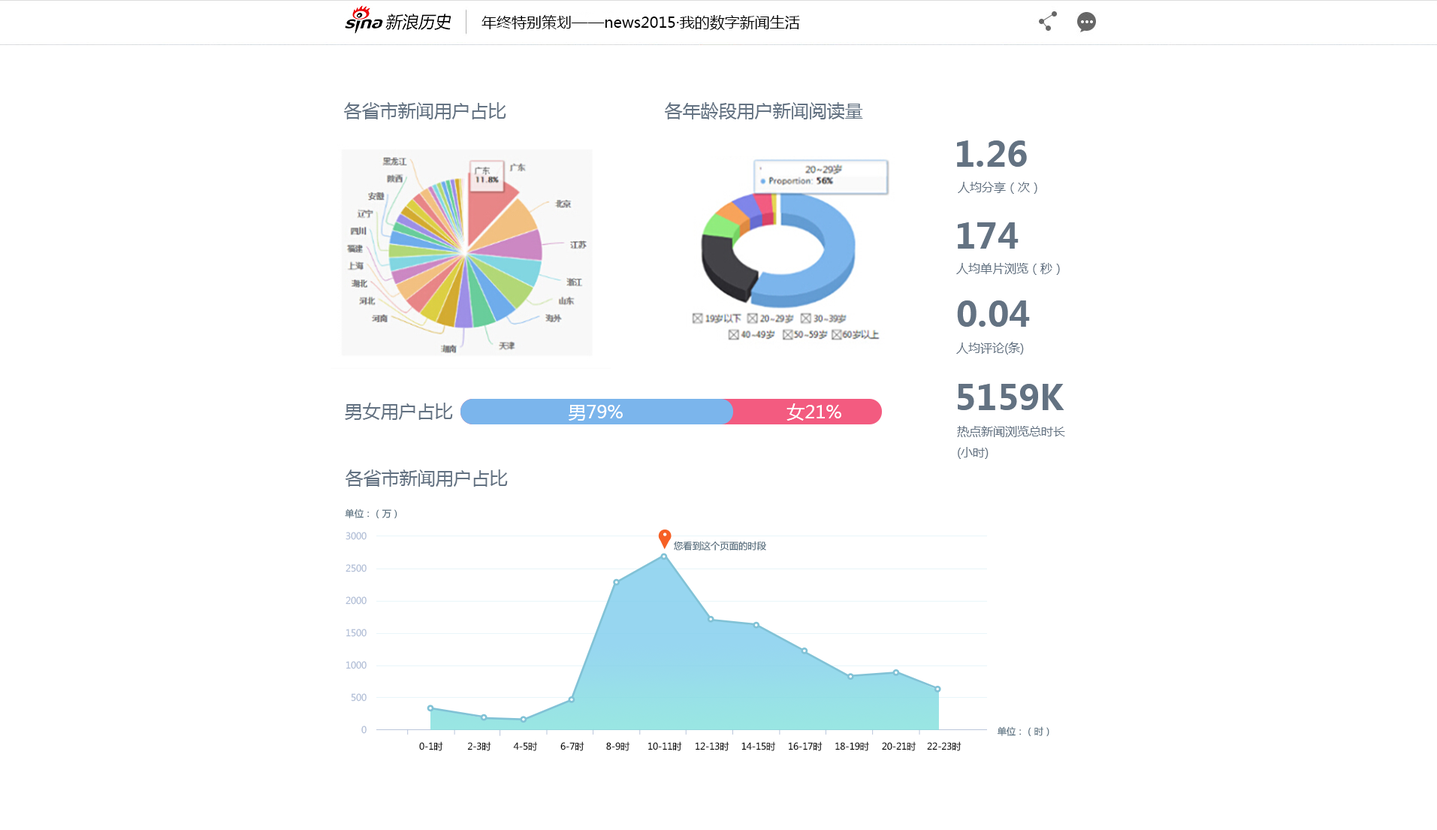
<style>
.page{position:relative;width:1437px;height:830px;background:#ffffff}
.page>*{position:absolute;margin:0}
.t1{font:15px "MicrosoftYaHei";color:#000000}
.t2{font:18px "MicrosoftYaHei";color:#637282}
.t3{font:34.5px "MicrosoftYaHei-Bold";color:#637282}
.t4{font:12px "MicrosoftYaHei";color:#637282}
.t5{font:18px "MicrosoftYaHei";color:#ffffff}
.t6{font:9.2px "MicrosoftYaHei";color:#50697a}
.t7{font:9.2px/32.3px "MicrosoftYaHei";color:#b0bdd6}
.t8{font:9.2px "MicrosoftYaHei";color:#000000}
</style>
<div class="page">
<p class="t1" style="left:481px;top:15px;width:319px;height:15px">年终特别策划——news2015·我的数字新闻生活</p>
<p class="t2" style="left:343px;top:102px;width:163px;height:17px">各省市新闻用户占比</p>
<p class="t2" style="left:664px;top:102px;width:199px;height:17px">各年龄段用户新闻阅读量</p>
<p class="t3" style="left:957px;top:140px;width:70px;height:27px">1.26</p>
<p class="t4" style="left:958px;top:182px;width:79px;height:12px">人均分享（次）</p>
<p class="t3" style="left:958px;top:222px;width:60px;height:27px">174</p>
<p class="t4" style="left:956px;top:263px;width:104px;height:12px">人均单片浏览（秒）</p>
<p class="t3" style="left:957px;top:300px;width:73px;height:27px">0.04</p>
<p class="t4" style="left:956px;top:342px;width:68px;height:13px">人均评论(条)</p>
<p class="t3" style="left:958px;top:383px;width:106px;height:27px">5159K</p>
<p class="t2" style="left:345px;top:403px;width:108px;height:17px">男女用户占比</p>
<p class="t5" style="left:569px;top:405px;width:54px;height:16px">男79%</p>
<p class="t5" style="left:786px;top:403px;width:55px;height:18px">女21%</p>
<p class="t4" style="left:957px;top:426px;width:108px;height:33px">热点新闻浏览总时长<br>(小时)</p>
<p class="t2" style="left:345px;top:469px;width:163px;height:18px">各省市新闻用户占比</p>
<p class="t6" style="left:345px;top:508px;width:52px;height:11px">单位：（万）</p>
<p class="t7" style="left:345px;top:532px;width:22px;height:202px;text-align:right">3000<br>2500<br>2000<br>1500<br>1000<br>500<br>0</p>
<p class="t6" style="left:674px;top:541px;width:92px;height:10px">您看到这个页面的时段</p>
<p class="t6" style="left:997px;top:726px;width:52px;height:11px">单位：（时）</p>
<p class="t8" style="left:419px;top:741px;width:24px;height:10px">0-1时</p>
<p class="t8" style="left:467px;top:741px;width:24px;height:10px">2-3时</p>
<p class="t8" style="left:513px;top:741px;width:25px;height:10px">4-5时</p>
<p class="t8" style="left:560px;top:741px;width:24px;height:10px">6-7时</p>
<p class="t8" style="left:606px;top:741px;width:24px;height:10px">8-9时</p>
<p class="t8" style="left:647px;top:741px;width:35px;height:10px">10-11时</p>
<p class="t8" style="left:695px;top:741px;width:34px;height:10px">12-13时</p>
<p class="t8" style="left:741px;top:741px;width:35px;height:10px">14-15时</p>
<p class="t8" style="left:788px;top:741px;width:34px;height:10px">16-17时</p>
<p class="t8" style="left:835px;top:741px;width:34px;height:10px">18-19时</p>
<p class="t8" style="left:882px;top:741px;width:34px;height:10px">20-21时</p>
<p class="t8" style="left:927px;top:741px;width:34px;height:10px">22-23时</p>
</div>
